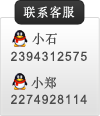
<style>
.page{position:relative;width:100px;height:116px}
.page>*{position:absolute;margin:0}
.t1{font:12.6px "STSongti-SC-Regular";letter-spacing:0.09em;color:#feffff;scale:0.95 1}
.t2{font:12.6px "STSongti-SC-Regular";letter-spacing:0.09em;color:#4b4b4b;scale:0.95 1}
.t3{font:12.6px "ArialMT";letter-spacing:0.09em;color:#4b4b4b;scale:0.95 1}
</style>
<div class="page">
<p class="t1" style="left:23px;top:6px;width:52px;height:13px">联系客服</p>
<p class="t2" style="left:32px;top:32px;width:25px;height:13px">小石</p>
<p class="t3" style="left:11px;top:51px;width:76px;height:10px">2394312575</p>
<p class="t2" style="left:31px;top:76px;width:25px;height:13px">小郑</p>
<p class="t3" style="left:11px;top:94px;width:76px;height:10px">2274928114</p>
</div>
